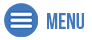
<style>
.page{position:relative;width:92px;height:40px;background:#ffffff}
.page>*{position:absolute;margin:0}
.t1{font:22px "BebasNeue";color:#4279bd}
</style>
<div class="page">
<p class="t1" style="left:47px;top:13px;width:37px;height:16px">menu</p>
</div>
